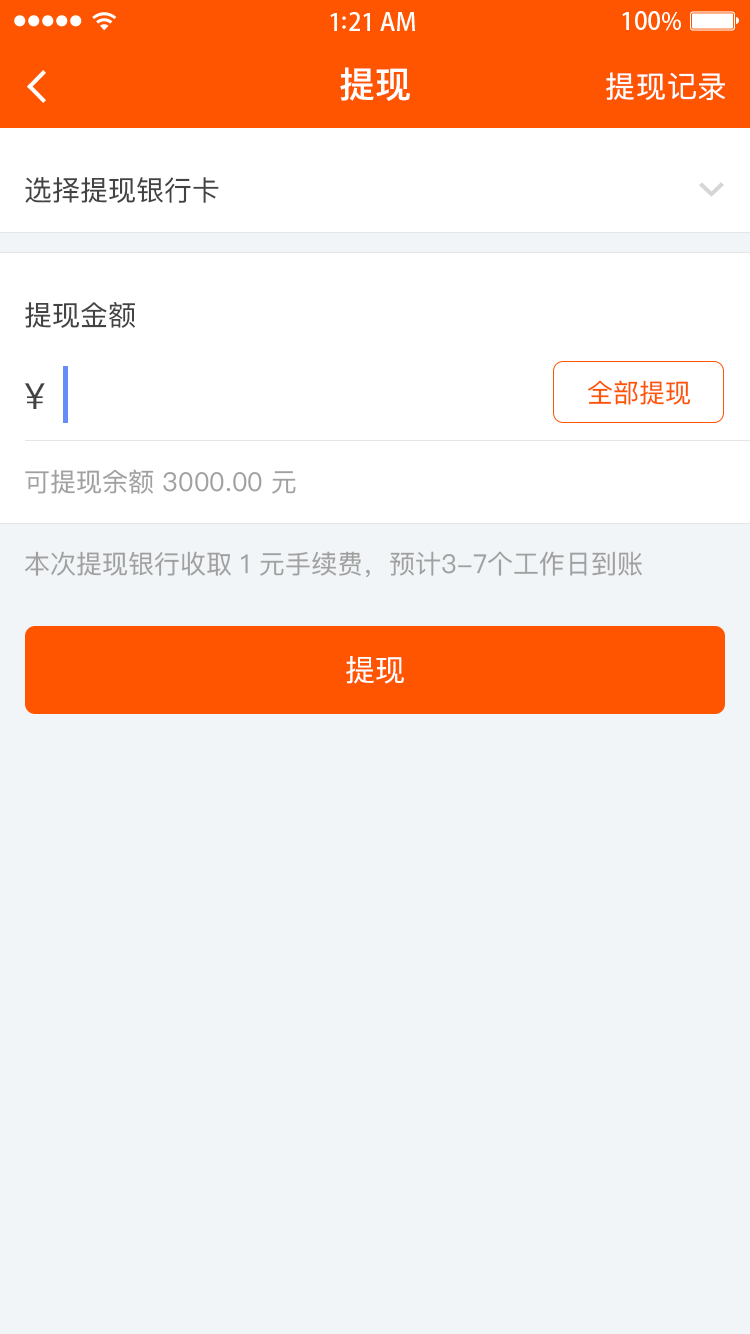
<style>
.page{position:relative;width:750px;height:1334px;background:#f2f5f7}
.page>*{position:absolute;margin:0}
.t1{font:36px "PingFangSC-Medium";letter-spacing:0.02em;color:#ffffff}
.t2{font:30px "PingFangSC-Regular";letter-spacing:0.02em;color:#ffffff}
.t3{font:28px "PingFangSC-Regular";color:#434343}
.t4{font:36px "PingFangSC-Regular";color:#434343}
.t5{font:26px "PingFangSC-Regular";color:#ff5400}
.t6{font:26px "PingFangSC-Regular";color:#a0a0a0}
.t7{font:30px "PingFangSC-Regular";color:#ffffff;text-transform:uppercase}
</style>
<div class="page">
<p class="t1" style="left:340px;top:67px;width:70px;height:34px">提现</p>
<p class="t2" style="left:606px;top:72px;width:119px;height:29px">提现记录</p>
<p class="t3" style="left:25px;top:176px;width:194px;height:27px">选择提现银行卡</p>
<p class="t3" style="left:25px;top:302px;width:110px;height:26px">提现金额</p>
<p class="t4" style="left:24px;top:383px;width:21px;height:26px">¥</p>
<p class="t5" style="left:588px;top:380px;width:103px;height:25px">全部提现</p>
<p class="t6" style="left:25px;top:469px;width:271px;height:25px">可提现余额 3000.00 元</p>
<p class="t6" style="left:25px;top:551px;width:617px;height:27px">本次提现银行收取 1 元手续费，预计3-7个工作日到账</p>
<p class="t7" style="left:346px;top:656px;width:58px;height:28px">提现</p>
</div>
